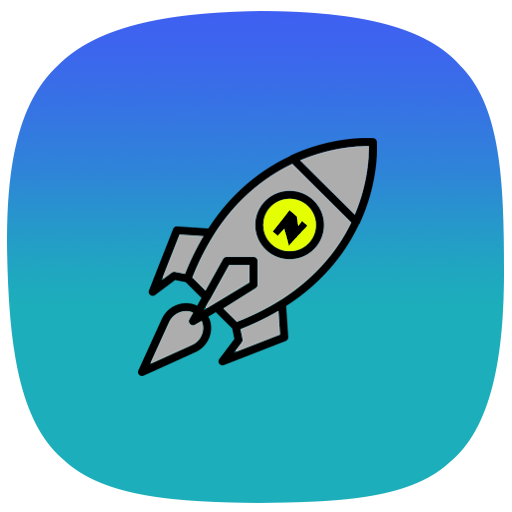
<style>
.page{position:relative;width:512px;height:512px;background:#1caebb}
.page>*{position:absolute;margin:0}
.t1{font:36px "ShowcardGothic-Reg";color:#000000;scale:1.13 1}
</style>
<div class="page">
<p class="t1" style="left:272px;top:210px;width:36px;height:36px;rotate:41deg">N</p>
</div>
